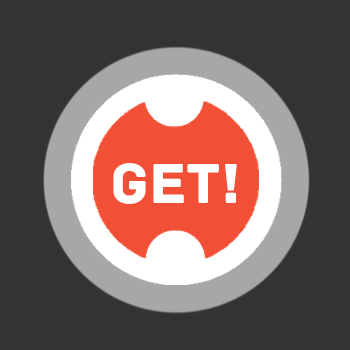
<style>
.page{position:relative;width:350px;height:350px;background:#333333}
.page>*{position:absolute;margin:0}
.t1{font:60px "Archive";color:#ffffff}
.t2{font:48px "Archive";color:#ffffff}
</style>
<div class="page">
<p class="t1" style="left:113px;top:163px;width:124px;height:41px"><span class="t2"><br></span><br>GET!</p>
</div>
